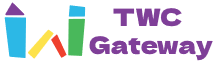
<style>
.page{position:relative;width:216px;height:63px;background:#ffffff}
.page>*{position:absolute;margin:0}
.t1{font:24px "DelaGothicOne-Regular";color:#7f3f98}
</style>
<div class="page">
<p class="t1" style="left:89px;top:8px;width:124px;height:53px">TWC<br>Gateway</p>
</div>
